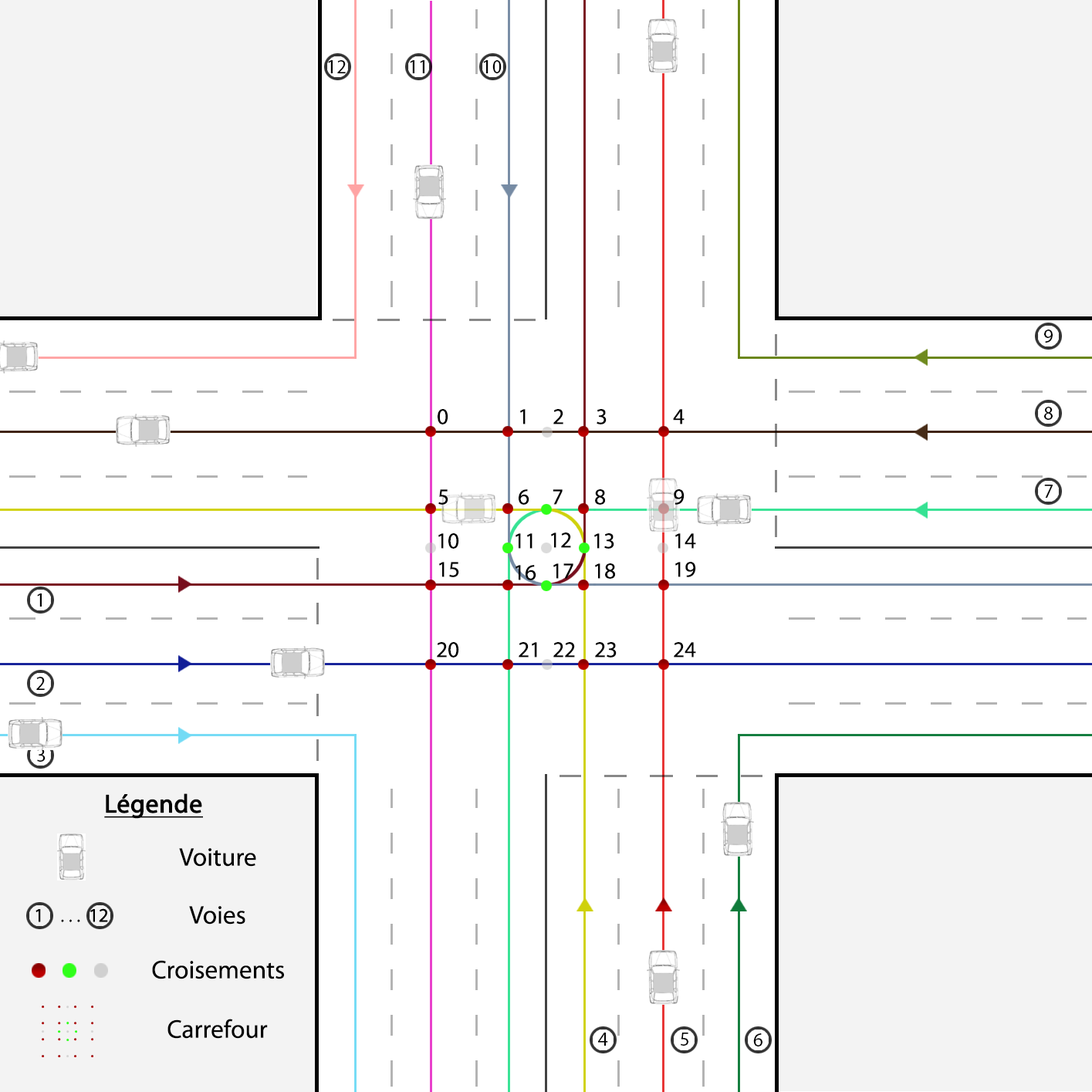
<style>
.page{position:relative;width:1092px;height:1092px;background:#ffffff}
.page>*{position:absolute;margin:0}
.t1{font:19.3px "MyriadPro-Regular";color:#000000}
.t2{font:22.5px "MyriadPro-Regular";color:#000000}
.t3{font:25.7px "MyriadPro-Regular";color:#000000;font-weight:bold;text-decoration:underline}
.t4{font:25.7px "MyriadPro-Regular";color:#000000}
</style>
<div class="page">
<p class="t1" style="left:328px;top:60px;width:18px;height:13px">12</p>
<p class="t1" style="left:410px;top:60px;width:14px;height:13px">11</p>
<p class="t1" style="left:483px;top:60px;width:19px;height:13px">10</p>
<p class="t1" style="left:1044px;top:330px;width:9px;height:13px">9</p>
<p class="t2" style="left:438px;top:409px;width:10px;height:15px">0</p>
<p class="t2" style="left:520px;top:409px;width:6px;height:15px">1</p>
<p class="t2" style="left:553px;top:409px;width:10px;height:15px">2</p>
<p class="t2" style="left:597px;top:409px;width:10px;height:15px">3</p>
<p class="t2" style="left:673px;top:409px;width:12px;height:15px">4</p>
<p class="t1" style="left:1044px;top:407px;width:9px;height:13px">8</p>
<p class="t1" style="left:1044px;top:485px;width:9px;height:13px">7</p>
<p class="t2" style="left:438px;top:489px;width:10px;height:16px">5</p>
<p class="t2" style="left:519px;top:489px;width:10px;height:16px">6</p>
<p class="t2" style="left:553px;top:489px;width:10px;height:16px">7</p>
<p class="t2" style="left:595px;top:489px;width:10px;height:16px">8</p>
<p class="t2" style="left:674px;top:489px;width:11px;height:16px">9</p>
<p class="t2" style="left:438px;top:533px;width:21px;height:16px">10</p>
<p class="t2" style="left:516px;top:533px;width:16px;height:16px">11</p>
<p class="t2" style="left:551px;top:532px;width:20px;height:16px">12</p>
<p class="t2" style="left:594px;top:533px;width:20px;height:16px">13</p>
<p class="t2" style="left:675px;top:533px;width:21px;height:16px">14</p>
<p class="t2" style="left:439px;top:562px;width:20px;height:15px">15</p>
<p class="t2" style="left:516px;top:565px;width:20px;height:15px">16</p>
<p class="t2" style="left:553px;top:563px;width:20px;height:16px">17</p>
<p class="t2" style="left:595px;top:563px;width:20px;height:16px">18</p>
<p class="t2" style="left:675px;top:562px;width:21px;height:15px">19</p>
<p class="t1" style="left:37px;top:593px;width:5px;height:14px">1</p>
<p class="t2" style="left:437px;top:642px;width:22px;height:16px">20</p>
<p class="t2" style="left:519px;top:642px;width:18px;height:16px">21</p>
<p class="t2" style="left:553px;top:642px;width:22px;height:16px">22</p>
<p class="t2" style="left:595px;top:642px;width:22px;height:16px">23</p>
<p class="t2" style="left:674px;top:642px;width:22px;height:16px">24</p>
<p class="t1" style="left:36px;top:677px;width:9px;height:13px">2</p>
<p class="t1" style="left:37px;top:749px;width:9px;height:13px">3</p>
<p class="t3" style="left:104px;top:793px;width:99px;height:26px">Légende</p>
<p class="t4" style="left:179px;top:848px;width:77px;height:19px">Voiture</p>
<p class="t4" style="left:189px;top:906px;width:56px;height:19px">Voies</p>
<p class="t4" style="left:152px;top:960px;width:132px;height:19px">Croisements</p>
<p class="t4" style="left:167px;top:1019px;width:101px;height:20px">Carrefour</p>
<p class="t1" style="left:598px;top:1033px;width:10px;height:13px">4</p>
<p class="t1" style="left:681px;top:1033px;width:7px;height:13px">5</p>
<p class="t1" style="left:753px;top:1033px;width:9px;height:13px">6</p>
</div>
